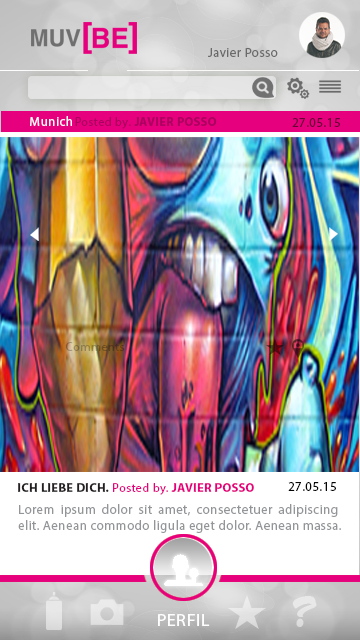
<style>
.page{position:relative;width:360px;height:640px}
.page>*{position:absolute;margin:0}
.t1{font:13px "MyriadPro-Regular";letter-spacing:0.035em;color:#6a6a6a}
.t2{font:13px "MyriadPro-Regular";letter-spacing:0.035em;color:#fdfdfe}
.t3{font:12.1px "MyriadPro-Bold";letter-spacing:0.035em;color:#aa005f}
.t4{font:12.1px "MyriadPro-Regular";letter-spacing:0.035em;color:#aa005f}
.t5{font:13px "MyriadPro-Regular";letter-spacing:0.035em;color:#680038}
.t6{font:12.1px "MyriadPro-Regular";letter-spacing:0.035em}
.t7{font:12.1px "MyriadPro-Bold";letter-spacing:0.035em;color:#231f20}
.t8{font:12.1px "MyriadPro-Regular";letter-spacing:0.035em;color:#e6007e}
.t9{font:12.1px "MyriadPro-Bold";letter-spacing:0.035em;color:#e6007e}
.t10{font:13px "MyriadPro-Regular";letter-spacing:0.035em;color:#040404}
.t11{font:13px "MyriadPro-Regular";letter-spacing:0.035em;color:#939598}
.t12{font:35.4px "CandyScript";letter-spacing:0.035em;color:#ffffff}
.t13{font:17.5px "MyriadPro-Regular";letter-spacing:0.035em;color:#fefefe;scale:1.03 1}
</style>
<div class="page">
<p class="t1" style="left:208px;top:48px;width:70px;height:9px">Javier Posso</p>
<p class="t2" style="left:30px;top:116px;width:42px;height:10px">Munich</p>
<p class="t3" style="left:75px;top:117px;width:142px;height:12px"><span class="t4">Posted by. </span>JAVIER POSSO</p>
<p class="t5" style="left:292px;top:118px;width:48px;height:9px">27.05.15</p>
<p class="t6" style="left:66px;top:342px;width:59px;height:9px">Comments</p>
<p class="t7" style="left:18px;top:483px;width:236px;height:12px">ICH LIEBE DICH. <span class="t8">Posted by. </span><span class="t9">JAVIER POSSO</span></p>
<p class="t10" style="left:288px;top:482px;width:48px;height:9px">27.05.15</p>
<p class="t11" style="left:18px;top:504px;width:323px;height:29px;text-align:justify">Lorem ipsum dolor sit amet, consectetuer adipiscing elit. Aenean commodo ligula eget dolor. Aenean massa.</p>
<p class="t12" style="left:292px;top:596px;width:25px;height:31px;opacity:0.5">?</p>
<p class="t13" style="left:158px;top:614px;width:52px;height:12px">PERFIL</p>
</div>
